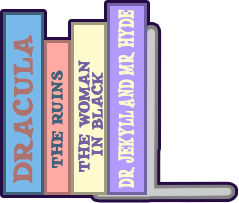
<style>
.page{position:relative;width:239px;height:203px;background:#ffffff}
.page>*{position:absolute;margin:0}
.t1{font:17.4px "JMHSALOON-Regular";color:#ffface;scale:0.54 1}
.t2{font:22px "JMHSALOON-Regular";color:#ad746f}
.t3{font:12.6px/12.6px "JMHSALOON-Regular";color:#7162a1}
.t4{font:12.6px "JMHSALOON-Regular";color:#40617a}
</style>
<div class="page">
<p class="t1" style="left:118px;top:9px;width:18px;height:179px;rotate:-90deg">Dr. Jekyll and Mr. Hyde</p>
<p class="t2" style="left:12px;top:34px;width:22px;height:149px;rotate:-90deg">Dracula</p>
<p class="t3" style="left:78px;top:60px;width:26px;height:112px;text-align:center;rotate:-90deg">The Woman<br> in Black</p>
<p class="t4" style="left:51px;top:70px;width:12px;height:98px;rotate:-90deg">The Ruins</p>
</div>
